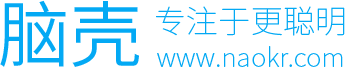
<style>
.page{position:relative;width:345px;height:67px;background:#ffffff}
.page>*{position:absolute;margin:0}
.t1{font:72px "SourceHanSansCN-Normal";color:#03a9f4}
.t2{font:32px "SourceHanSansCN-ExtraLight";letter-spacing:0.01em;color:#03a9f4}
.t3{font:26px "SourceHanSansCN-ExtraLight";letter-spacing:0.01em;color:#03a9f4}
</style>
<div class="page">
<p class="t1" style="left:0px;top:0px;width:139px;height:67px">脑壳</p>
<p class="t2" style="left:156px;top:6px;width:189px;height:30px">专注于更聪明</p>
<p class="t3" style="left:157px;top:46px;width:186px;height:21px">www.naokr.com</p>
</div>
